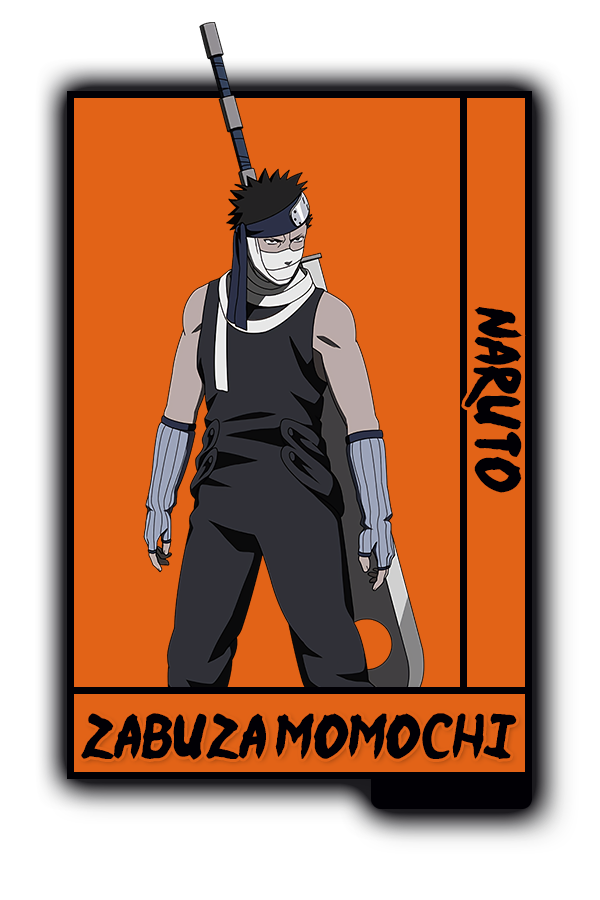
<style>
.page{position:relative;width:600px;height:900px;background:#e26317}
.page>*{position:absolute;margin:0}
.t1{font:52px "Ninja-Naruto";color:#010005}
.t2{font:50.5px "Ninja-Naruto";color:#010005}
</style>
<div class="page">
<p class="t1" style="left:464px;top:307px;width:59px;height:186px;rotate:90deg">Naruto</p>
<p class="t2" style="left:81px;top:713px;width:436px;height:47px">Zabuza Momochi</p>
</div>
